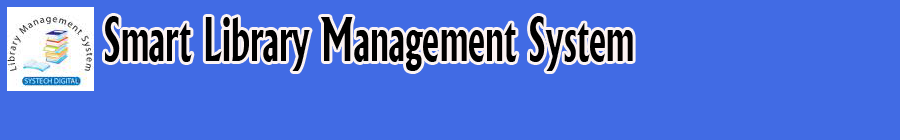
<style>
.page{position:relative;width:900px;height:140px;background:#416be4}
.page>*{position:absolute;margin:0}
.t1{font:57.9px "Albertus-Bold";color:#000000;scale:0.59 1}
</style>
<div class="page">
<p class="t1" style="left:105px;top:16px;width:528px;height:55px">Smart Library Management System</p>
</div>
